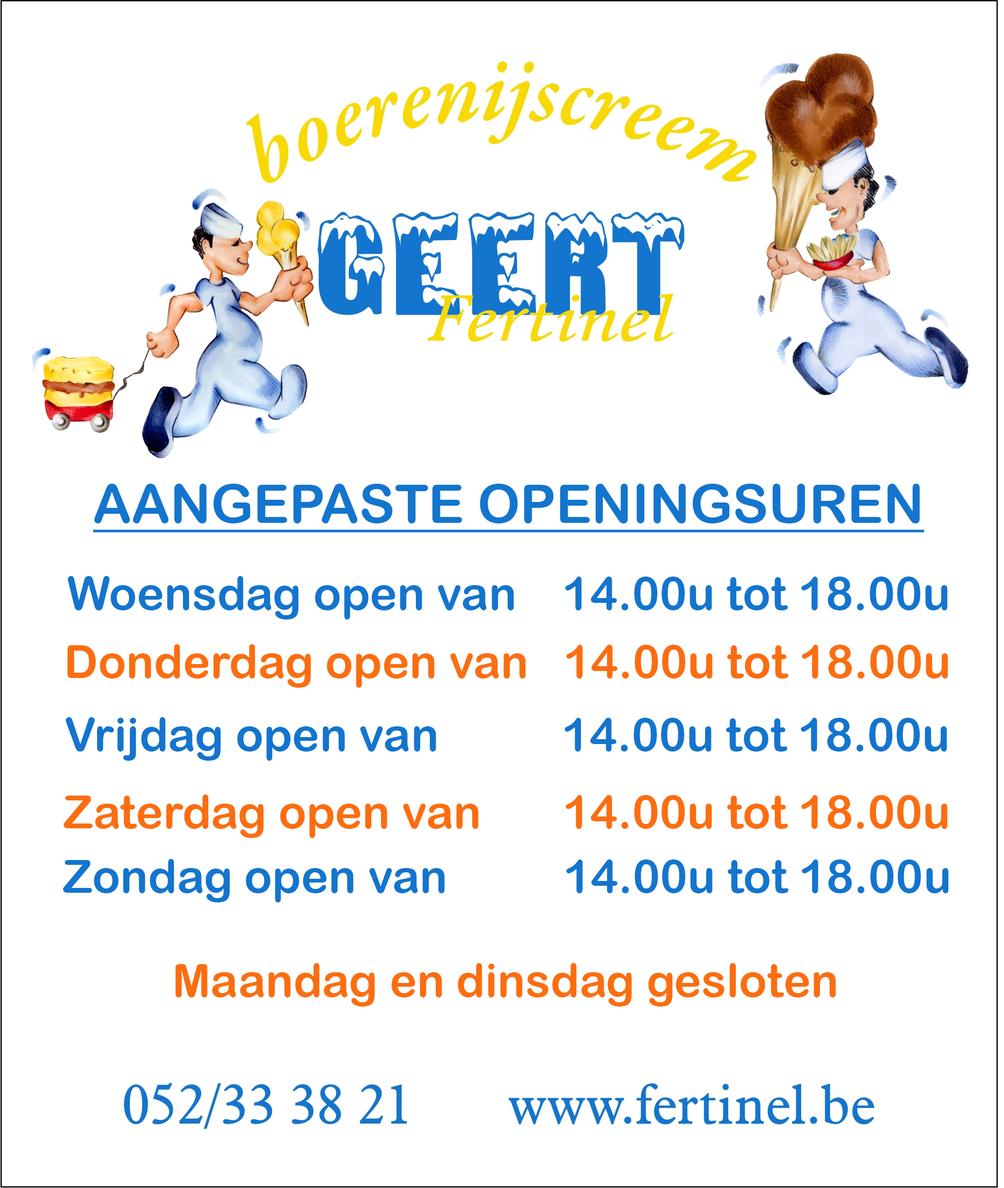
<style>
.page{position:relative;width:1004px;height:1188px;background:#ffffff}
.page>*{position:absolute;margin:0}
.t1{font:53.7px "ArialRoundedMTBold";color:#1375ce;text-decoration:underline}
.t2{font:46.2px "ArialRoundedMTBold";color:#1375ce}
.t3{font:46.2px "ArialRoundedMTBold";color:#fb6e10}
</style>
<div class="page">
<p class="t1" style="left:93px;top:484px;width:832px;height:48px">AANGEPASTE OPENINGSUREN</p>
<p class="t2" style="left:68px;top:576px;width:880px;height:43px">Woensdag open van    14.00u tot 18.00u</p>
<p class="t3" style="left:67px;top:644px;width:881px;height:43px">Donderdag open van   14.00u tot 18.00u</p>
<p class="t2" style="left:65px;top:717px;width:882px;height:43px">Vrijdag open van           14.00u tot 18.00u</p>
<p class="t3" style="left:63px;top:794px;width:885px;height:44px">Zaterdag open van        14.00u tot 18.00u</p>
<p class="t2" style="left:63px;top:859px;width:886px;height:43px">Zondag open van           14.00u tot 18.00u</p>
<p class="t3" style="left:175px;top:963px;width:661px;height:43px">Maandag en dinsdag gesloten</p>
</div>
